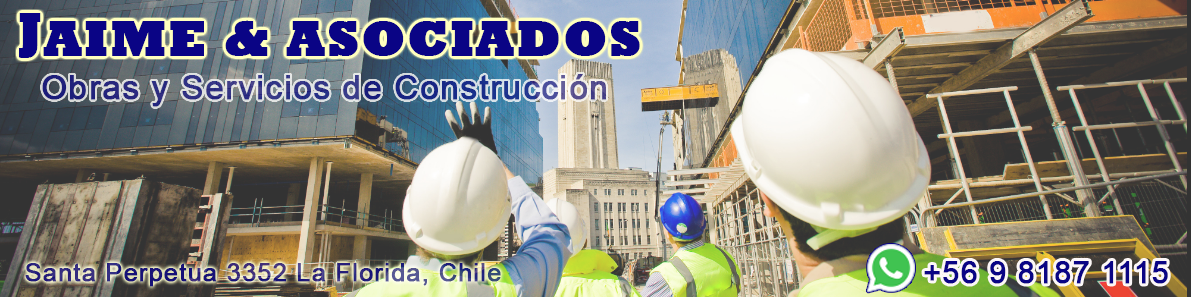
<style>
.page{position:relative;width:1191px;height:297px}
.page>*{position:absolute;margin:0}
.t1{font:50px "Rockwell-ExtraBold";letter-spacing:0.03em;color:#0a0485;font-weight:bold}
.t2{font:33px "ArialMT";letter-spacing:0.03em;color:#272f85;font-weight:bold}
.t3{font:25px "ArialMT";letter-spacing:0.03em;font-weight:bold}
.t4{font:30px "ArialMT";letter-spacing:0.03em;color:#0a0485;font-weight:bold}
</style>
<div class="page">
<p class="t1" style="left:19px;top:13px;width:22px;height:45px">J</p>
<p class="t1" style="left:43px;top:20px;width:597px;height:36px">AIME &amp; ASOCIADOS</p>
<p class="t2" style="left:42px;top:74px;width:564px;height:33px">Obras y Servicios de Construcción</p>
<p class="t3" style="left:25px;top:263px;width:476px;height:24px">Santa Perpetua 3352 La Florida, Chile</p>
<p class="t4" style="left:924px;top:261px;width:244px;height:23px">+56 9 8187 1115</p>
</div>
